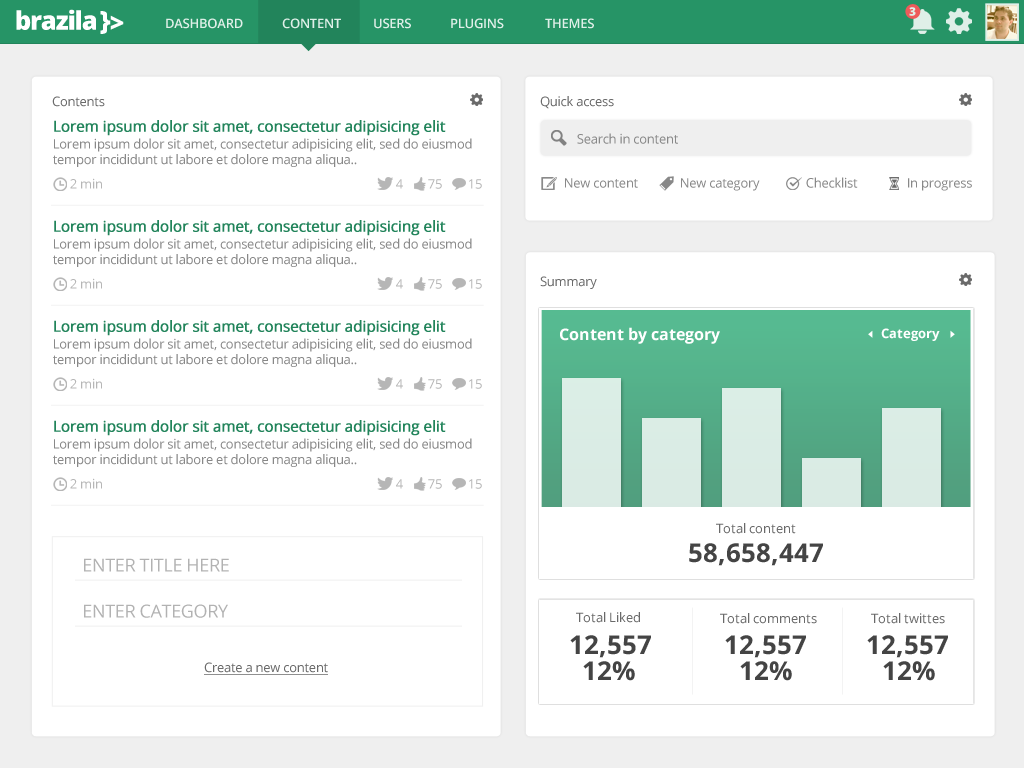
<style>
.page{position:relative;width:1024px;height:768px;background:#ffffff}
.page>*{position:absolute;margin:0}
.t1{font:25.9px "OpenSans-Extrabold";letter-spacing:-0.05em;color:#ffffff}
.t2{font:12px "OpenSans-Extrabold";letter-spacing:-0.05em;color:#dfefe8}
.t3{font:13px "OpenSans-Semibold";letter-spacing:-0.02em;color:#dfefe8}
.t4{font:13px "OpenSans";letter-spacing:-0.02em;color:#6a6a6a}
.t5{font:15px "OpenSans";letter-spacing:-0.02em;color:#22845b;font-weight:bold}
.t6{font:13px "OpenSans";letter-spacing:-0.02em;color:#888888}
.t7{font:13px "OpenSans";letter-spacing:-0.02em;color:#b6b6b6}
.t8{font:16px "OpenSans-Bold";color:#ffffff}
.t9{font:13px "OpenSans-Bold";color:#ffffff}
.t10{font:13px "OpenSans";color:#696969}
.t11{font:26px "OpenSans-Bold";color:#444444}
.t12{font:18px "OpenSans";letter-spacing:-0.02em;color:#b2b2b2;text-transform:uppercase}
.t13{font:13px "OpenSans";letter-spacing:-0.02em;color:#6a6a6a;text-decoration:underline}
</style>
<div class="page">
<p class="t1" style="left:16px;top:9px;width:80px;height:21px">brazila</p>
<p class="t1" style="left:100px;top:11px;width:11px;height:23px">}</p>
<p class="t1" style="left:110px;top:15px;width:14px;height:15px">&gt;</p>
<p class="t2" style="left:909px;top:7px;width:7px;height:9px">3</p>
<p class="t3" style="left:166px;top:18px;width:77px;height:11px">DASHBOARD</p>
<p class="t3" style="left:282px;top:18px;width:59px;height:11px">CONTENT</p>
<p class="t3" style="left:374px;top:18px;width:37px;height:11px">USERS</p>
<p class="t3" style="left:451px;top:18px;width:53px;height:11px">PLUGINS</p>
<p class="t3" style="left:545px;top:18px;width:49px;height:11px">THEMES</p>
<p class="t4" style="left:52px;top:96px;width:53px;height:11px">Contents</p>
<p class="t4" style="left:540px;top:96px;width:74px;height:13px">Quick access</p>
<p class="t5" style="left:54px;top:120px;width:392px;height:16px">Lorem ipsum dolor sit amet, consectetur adipisicing elit</p>
<p class="t6" style="left:577px;top:133px;width:101px;height:11px">Search in content</p>
<p class="t6" style="left:53px;top:138px;width:419px;height:29px">Lorem ipsum dolor sit amet, consectetur adipisicing elit, sed do eiusmod <br>tempor incididunt ut labore et dolore magna aliqua..</p>
<p class="t7" style="left:70px;top:178px;width:32px;height:11px">2 min</p>
<p class="t6" style="left:565px;top:178px;width:73px;height:10px">New content</p>
<p class="t6" style="left:681px;top:178px;width:79px;height:13px">New category</p>
<p class="t6" style="left:806px;top:177px;width:52px;height:11px">Checklist</p>
<p class="t6" style="left:908px;top:178px;width:64px;height:13px">In progress</p>
<p class="t5" style="left:54px;top:220px;width:392px;height:16px">Lorem ipsum dolor sit amet, consectetur adipisicing elit</p>
<p class="t6" style="left:53px;top:238px;width:419px;height:29px">Lorem ipsum dolor sit amet, consectetur adipisicing elit, sed do eiusmod <br>tempor incididunt ut labore et dolore magna aliqua..</p>
<p class="t7" style="left:70px;top:278px;width:32px;height:11px">2 min</p>
<p class="t4" style="left:540px;top:276px;width:57px;height:13px">Summary</p>
<p class="t5" style="left:54px;top:320px;width:392px;height:16px">Lorem ipsum dolor sit amet, consectetur adipisicing elit</p>
<p class="t8" style="left:560px;top:327px;width:160px;height:17px">Content by category</p>
<p class="t9" style="left:881px;top:328px;width:59px;height:13px">Category</p>
<p class="t6" style="left:53px;top:338px;width:419px;height:29px">Lorem ipsum dolor sit amet, consectetur adipisicing elit, sed do eiusmod <br>tempor incididunt ut labore et dolore magna aliqua..</p>
<p class="t7" style="left:70px;top:378px;width:32px;height:11px">2 min</p>
<p class="t5" style="left:54px;top:420px;width:392px;height:16px">Lorem ipsum dolor sit amet, consectetur adipisicing elit</p>
<p class="t6" style="left:53px;top:438px;width:419px;height:29px">Lorem ipsum dolor sit amet, consectetur adipisicing elit, sed do eiusmod <br>tempor incididunt ut labore et dolore magna aliqua..</p>
<p class="t7" style="left:70px;top:478px;width:32px;height:11px">2 min</p>
<p class="t10" style="left:716px;top:523px;width:80px;height:11px">Total content</p>
<p class="t11" style="left:689px;top:543px;width:134px;height:23px">58,658,447</p>
<p class="t12" style="left:84px;top:558px;width:145px;height:14px">Enter title HERE</p>
<p class="t12" style="left:84px;top:604px;width:144px;height:14px">Enter CATEGORY</p>
<p class="t10" style="left:576px;top:612px;width:64px;height:11px">Total Liked</p>
<p class="t10" style="left:720px;top:613px;width:97px;height:11px">Total comments</p>
<p class="t10" style="left:871px;top:613px;width:74px;height:11px">Total twittes</p>
<p class="t11" style="left:570px;top:635px;width:81px;height:23px">12,557</p>
<p class="t11" style="left:725px;top:635px;width:81px;height:23px">12,557</p>
<p class="t11" style="left:867px;top:635px;width:81px;height:23px">12,557</p>
<p class="t13" style="left:204px;top:662px;width:124px;height:13px">Create a new content</p>
<p class="t11" style="left:583px;top:661px;width:52px;height:20px">12%</p>
<p class="t11" style="left:740px;top:661px;width:52px;height:20px">12%</p>
<p class="t11" style="left:883px;top:661px;width:52px;height:20px">12%</p>
</div>
